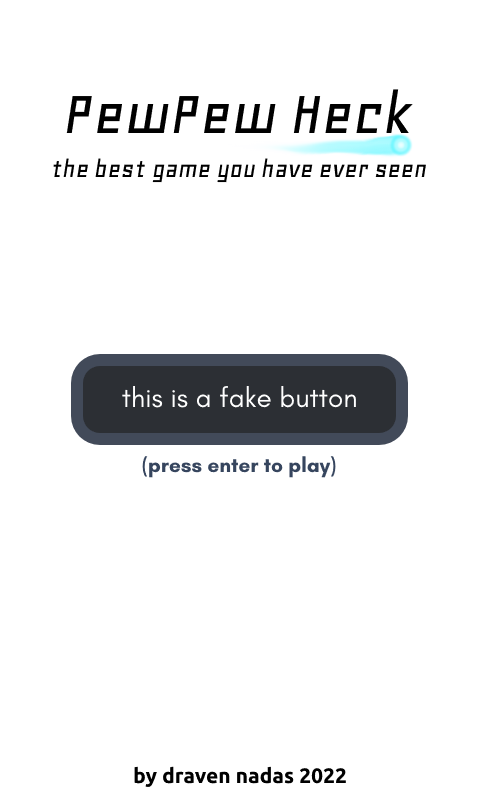
<style>
.page{position:relative;width:480px;height:800px;background:#ffffff}
.page>*{position:absolute;margin:0}
.t1{font:66px "GeoOblique";color:#000000}
.t2{font:28px "GeoOblique";color:#000000}
.t3{font:28px "GlacialIndifference-Regular";color:#ffffff}
.t4{font:21px "GlacialIndifference-Bold";color:#36455e}
.t5{font:21px "Ubuntu-Bold";color:#000000}
</style>
<div class="page">
<p class="t1" style="left:66px;top:89px;width:347px;height:44px">PewPew Heck</p>
<p class="t2" style="left:53px;top:158px;width:373px;height:25px">the best game you have ever seen</p>
<p class="t3" style="left:122px;top:385px;width:234px;height:23px">this is a fake button</p>
<p class="t4" style="left:142px;top:456px;width:194px;height:22px">(press enter to play)</p>
<p class="t5" style="left:134px;top:766px;width:212px;height:21px">by draven nadas 2022</p>
</div>
